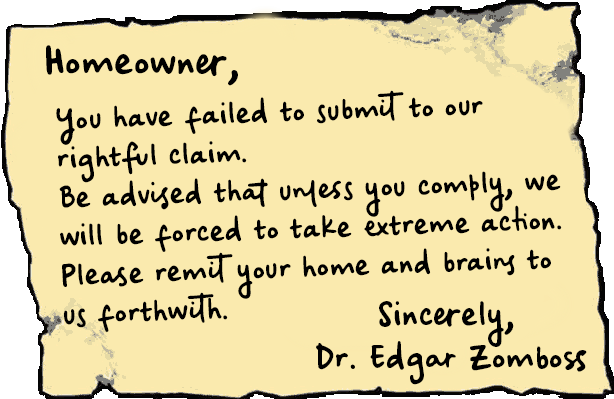
<style>
.page{position:relative;width:614px;height:399px;background:#faeaae}
.page>*{position:absolute;margin:0}
.t1{font:37.4px "iCielBeCool-Regular";letter-spacing:0.01em;color:#000000}
.t2{font:29px/39px "iCielBeCool-Regular";letter-spacing:0.01em;color:#000000}
.t3{font:32.4px/42.6px "iCielBeCool-Regular";letter-spacing:0.01em;color:#000000}
</style>
<div class="page">
<p class="t1" style="left:46px;top:45px;width:192px;height:41px">Homeowner,</p>
<p class="t2" style="left:56px;top:90px;width:506px;height:242px;rotate:-2deg">You have failed to submit to our rightful claim.<br>Be advised that unless you comply, we will be forced to take extreme action.<br>Please remit your home and brains to us forthwith.</p>
<p class="t3" style="left:316px;top:301px;width:271px;height:84px">Sincerely,<br>Dr. Edgar Zomboss</p>
</div>
